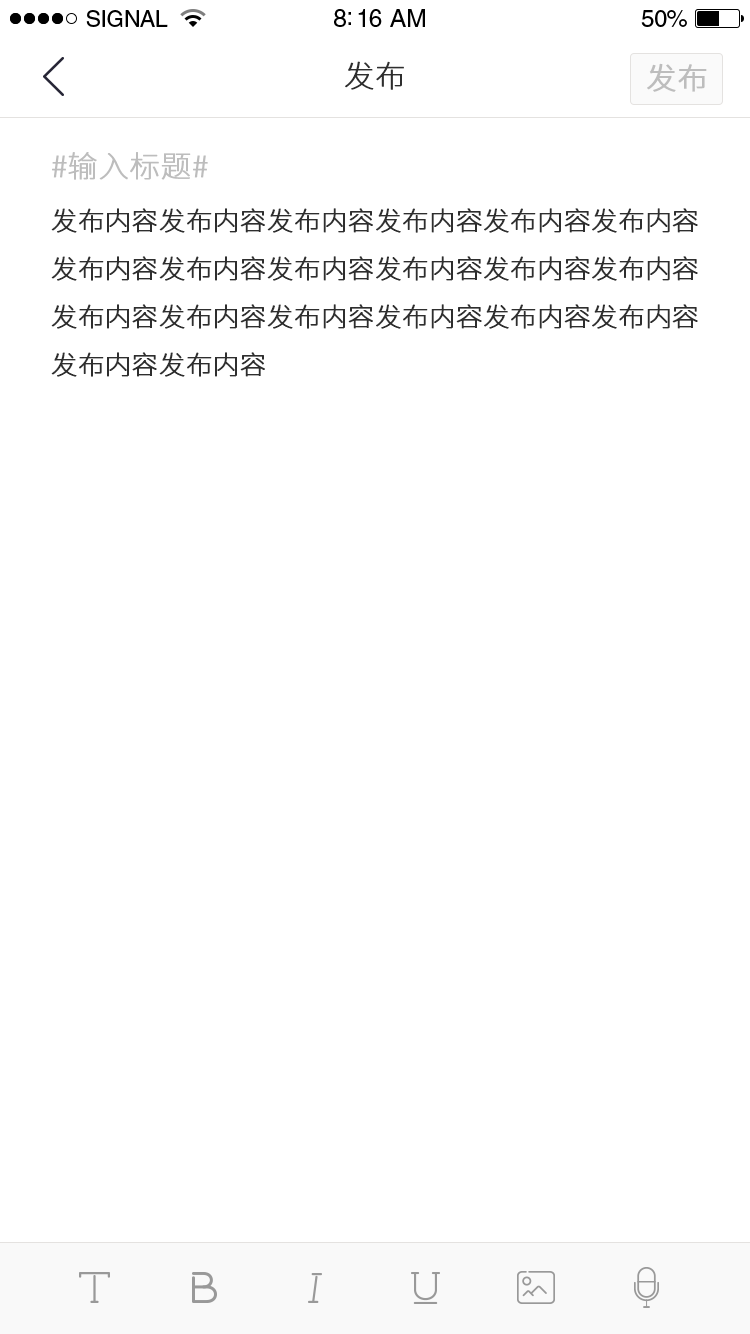
<style>
.page{position:relative;width:750px;height:1334px;background:#ffffff}
.page>*{position:absolute;margin:0}
.t1{font:23px "HelveticaLTStd-Roman";letter-spacing:-0.02em;color:#000000}
.t2{font:25px "HelveticaLTStd-Roman";letter-spacing:-0.02em;color:#000000}
.t3{font:24px "HelveticaLTStd-Roman";letter-spacing:-0.02em;color:#000000}
.t4{font:30px "SourceHanSansCN-ExtraLight";color:#2e2e2e;font-weight:bold}
.t5{font:30px "SourceHanSansCN-Light";color:#bdbdbd;font-weight:bold}
.t6{font:30px "SourceHanSansCN-ExtraLight";color:#bdbdbd;font-weight:bold}
.t7{font:26px/48px "SourceHanSansCN-ExtraLight";color:#2e2e2e;font-weight:bold}
</style>
<div class="page">
<p class="t1" style="left:86px;top:10px;width:82px;height:17px">SIGNAL</p>
<p class="t2" style="left:334px;top:9px;width:91px;height:18px">8:16 AM</p>
<p class="t3" style="left:641px;top:10px;width:46px;height:17px">50%</p>
<p class="t4" style="left:345px;top:61px;width:59px;height:29px">发布</p>
<p class="t5" style="left:647px;top:63px;width:60px;height:29px">发布</p>
<p class="t6" style="left:52px;top:152px;width:156px;height:28px">#输入标题#</p>
<p class="t7" style="left:51px;top:208px;width:647px;height:169px">发布内容发布内容发布内容发布内容发布内容发布内容<br>发布内容发布内容发布内容发布内容发布内容发布内容<br>发布内容发布内容发布内容发布内容发布内容发布内容<br>发布内容发布内容</p>
</div>
